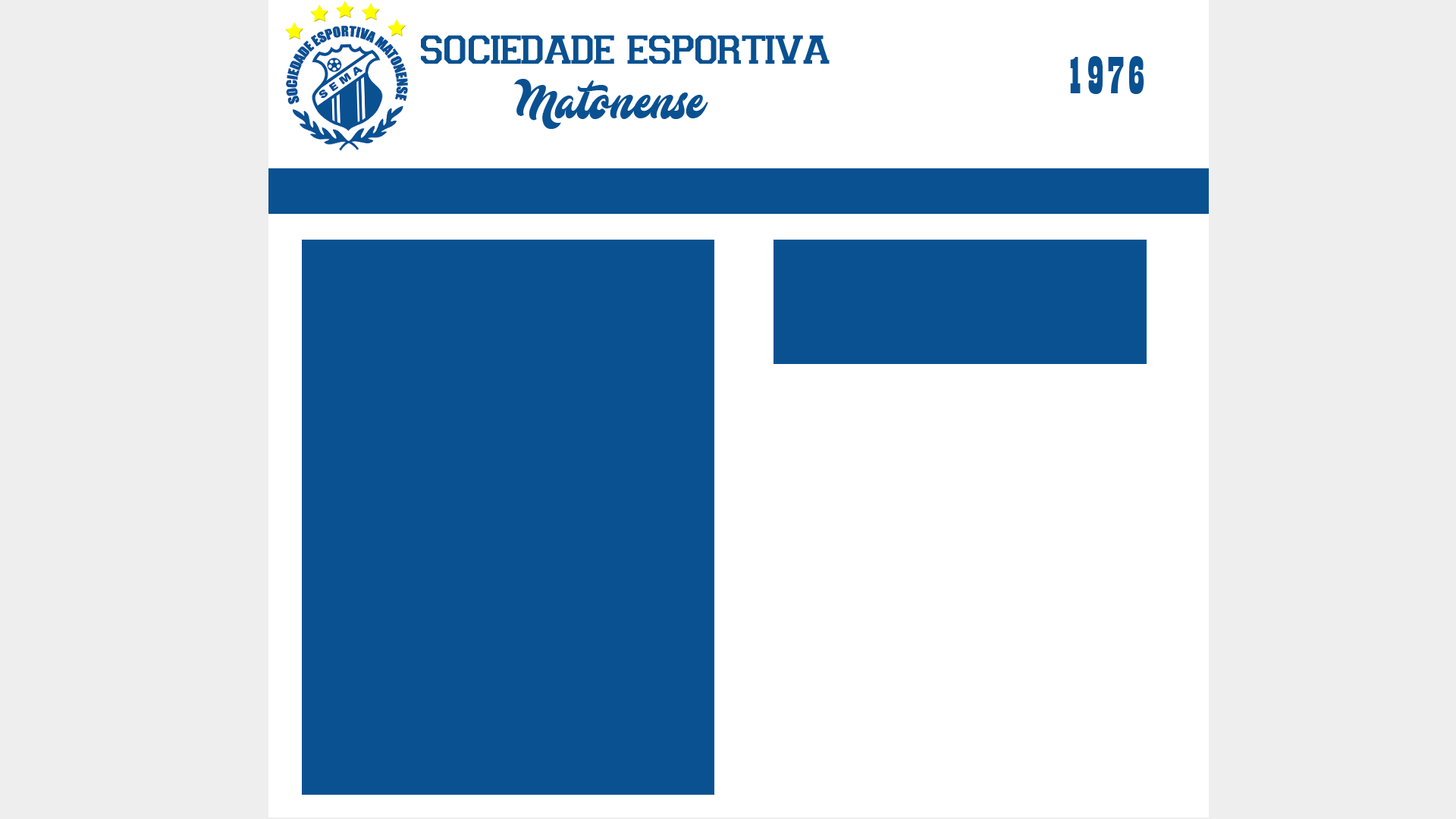
<style>
.page{position:relative;width:1456px;height:819px;background:#eeeeee}
.page>*{position:absolute;margin:0}
.t1{font:45.5px "Varsity-Regular";color:#0a5191}
.t2{font:45.5px "Mustardo";color:#0a5191}
.t3{font:54.6px "Playbill";color:#0a5191;scale:1.06 1}
</style>
<div class="page">
<p class="t1" style="left:421px;top:35px;width:409px;height:94px">sociedade esportiva<br>  <span class="t2">          Matonense</span></p>
<p class="t3" style="left:1070px;top:56px;width:74px;height:38px">1976</p>
</div>
